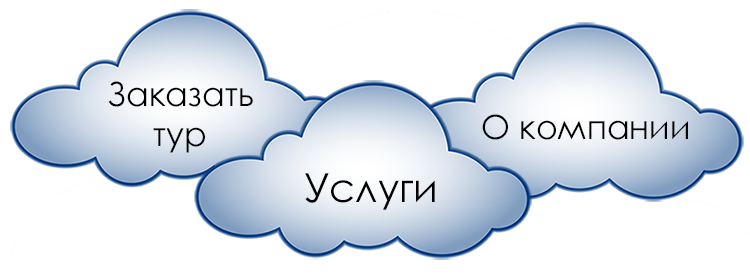
<style>
.page{position:relative;width:750px;height:274px;background:#ffffff}
.page>*{position:absolute;margin:0}
.t1{font:33.3px "CenturyGothic";color:#000000}
.t2{font:40px "CenturyGothic";color:#000000}
</style>
<div class="page">
<p class="t1" style="left:108px;top:81px;width:145px;height:72px;text-align:center">Заказать тур</p>
<p class="t1" style="left:482px;top:114px;width:206px;height:26px">О компании</p>
<p class="t2" style="left:305px;top:173px;width:130px;height:37px">Услуги</p>
</div>
